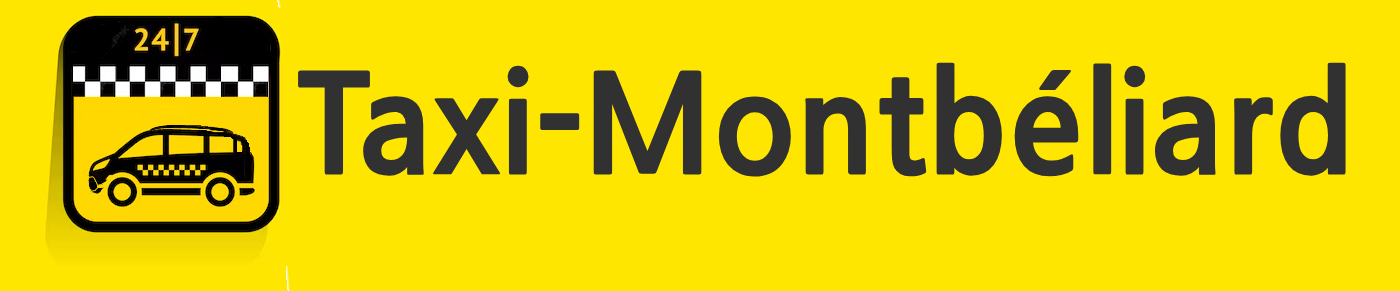
<style>
.page{position:relative;width:1400px;height:291px;background:#ffe601}
.page>*{position:absolute;margin:0}
.t1{font:135px "NanumGothicExtraBold";color:#313131}
</style>
<div class="page">
<p class="t1" style="left:298px;top:62px;width:1048px;height:115px">Taxi-Montbéliard</p>
</div>
